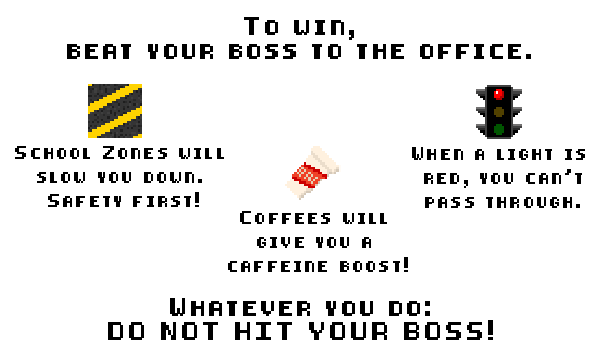
<style>
.page{position:relative;width:600px;height:360px;background:#ffffff}
.page>*{position:absolute;margin:0}
.t1{font:15px/24px "8-bit-pusab";letter-spacing:0.2em;color:#000000}
.t2{font:11px/24px "8-bit-pusab";letter-spacing:0.2em;color:#000000}
</style>
<div class="page">
<p class="t1" style="left:67px;top:17px;width:464px;height:42px;text-align:center">To win,<br>beat your boss to the office.</p>
<p class="t2" style="left:15px;top:146px;width:209px;height:61px;text-align:center">School Zones will <br>slow you down. <br>Safety first!</p>
<p class="t2" style="left:412px;top:147px;width:173px;height:61px;text-align:center">When a light is <br>red, you can’t<br>pass through.</p>
<p class="t2" style="left:228px;top:211px;width:180px;height:61px;text-align:center">Coffees will <br>give you a <br>caffeine boost!</p>
<p class="t1" style="left:108px;top:298px;width:385px;height:42px;text-align:center">Whatever you do:<br>DO NOT HIT YOUR BOSS!</p>
</div>
